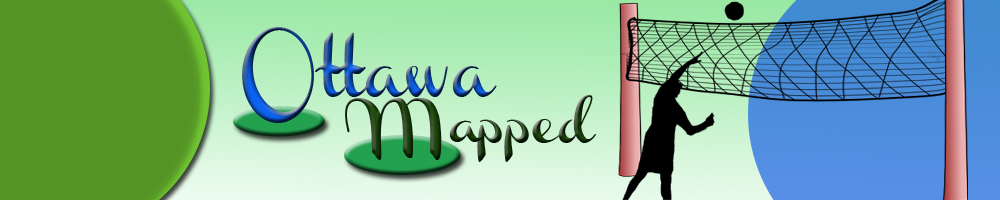
<style>
.page{position:relative;width:1000px;height:200px}
.page>*{position:absolute;margin:0}
.t1{font:64.1px "Channel"}
.t2{font:50.5px "Channel";scale:0.94 1}
.t3{font:40.2px "Channel";scale:1.15 1}
.t4{font:33.5px "Channel";scale:1.15 1}
.t5{font:38.5px/31px "Channel";scale:1.04 1}
</style>
<div class="page">
<p class="t1" style="left:242px;top:27px;width:72px;height:96px">O</p>
<p class="t2" style="left:315px;top:32px;width:182px;height:65px">ttawa</p>
<p class="t3" style="left:345px;top:98px;width:142px;height:62px">M<span class="t4">a</span></p>
<p class="t5" style="left:477px;top:95px;width:119px;height:67px">pped</p>
</div>
